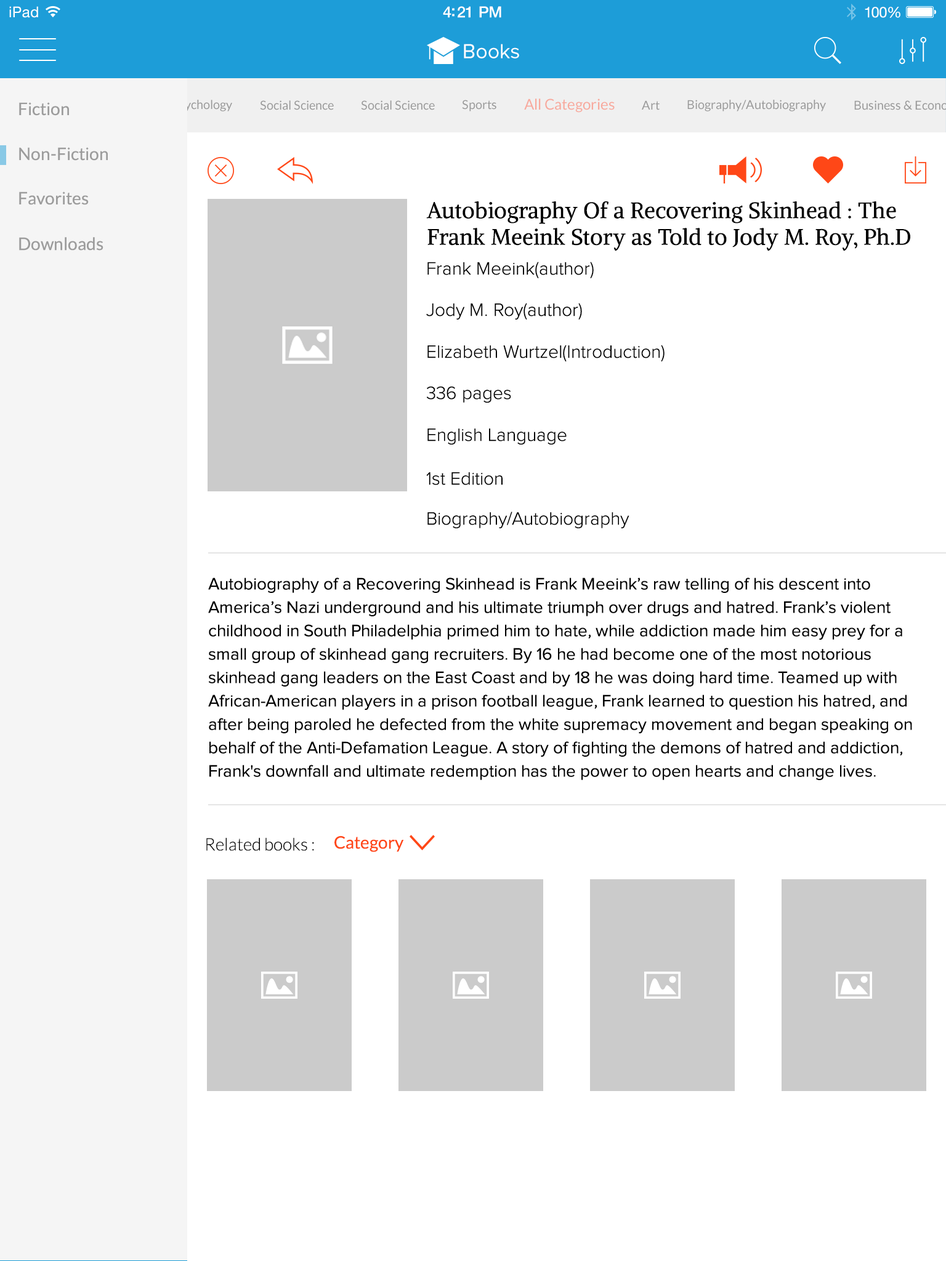
<style>
.page{position:relative;width:946px;height:1261px;background:#ffffff}
.page>*{position:absolute;margin:0}
.t1{font:14.8px "HelveticaNeue";letter-spacing:0.02em;color:#ffffff}
.t2{font:15.4px "HelveticaNeue-Medium";letter-spacing:-0.02em;color:#ffffff}
.t3{font:14.8px "HelveticaNeue";letter-spacing:-0.02em;color:#ffffff}
.t4{font:20.9px "ProximaNova-Regular";color:#ffffff}
.t5{font:12.3px "Lato-Regular";color:#999999}
.t6{font:14.8px "Lato-Regular";color:#f8a99d}
.t7{font:17.3px "Lato-Regular";color:#9c9c9c}
.t8{font:22.2px "Alike-Regular";color:#000000}
.t9{font:18.5px "ProximaNova-Light";color:#000000}
.t10{font:17.2px/23.4px "ProximaNova-Regular";color:#000000}
.t11{font:17.2px "Lato-Light";color:#000000}
.t12{font:17.2px "Lato-Regular";color:#ff4717}
</style>
<div class="page">
<p class="t1" style="left:9px;top:6px;width:29px;height:12px">iPad</p>
<p class="t2" style="left:443px;top:6px;width:58px;height:12px">4:21 PM</p>
<p class="t3" style="left:864px;top:7px;width:36px;height:11px">100%</p>
<p class="t4" style="left:464px;top:44px;width:55px;height:14px">Books</p>
<p class="t5" style="left:173px;top:100px;width:59px;height:11px">Psychology</p>
<p class="t5" style="left:260px;top:100px;width:74px;height:10px">Social Science</p>
<p class="t5" style="left:361px;top:100px;width:74px;height:10px">Social Science</p>
<p class="t5" style="left:462px;top:100px;width:34px;height:11px">Sports</p>
<p class="t6" style="left:524px;top:99px;width:90px;height:14px">All Categories</p>
<p class="t5" style="left:642px;top:100px;width:17px;height:10px">Art</p>
<p class="t5" style="left:687px;top:100px;width:139px;height:11px">Biography/Autobiography</p>
<p class="t7" style="left:19px;top:102px;width:50px;height:14px">Fiction</p>
<p class="t7" style="left:19px;top:147px;width:89px;height:14px">Non-Fiction</p>
<p class="t7" style="left:19px;top:191px;width:70px;height:14px">Favorites</p>
<p class="t8" style="left:426px;top:201px;width:484px;height:50px">Autobiography Of a Recovering Skinhead : The Frank Meeink Story as Told to Jody M. Roy, Ph.D</p>
<p class="t7" style="left:19px;top:237px;width:84px;height:14px">Downloads</p>
<p class="t9" style="left:427px;top:262px;width:167px;height:16px">Frank Meeink(author)</p>
<p class="t9" style="left:426px;top:303px;width:156px;height:17px">Jody M. Roy(author)</p>
<p class="t9" style="left:427px;top:345px;width:237px;height:17px">Elizabeth Wurtzel(Introduction)</p>
<p class="t9" style="left:426px;top:386px;width:85px;height:17px">336 pages</p>
<p class="t9" style="left:427px;top:429px;width:139px;height:16px">English Language</p>
<p class="t9" style="left:426px;top:472px;width:76px;height:13px">1st Edition</p>
<p class="t9" style="left:427px;top:512px;width:202px;height:16px">Biography/Autobiography</p>
<p class="t10" style="left:208px;top:578px;width:704px;height:202px">Autobiography of a Recovering Skinhead is Frank Meeink’s raw telling of his descent into America’s Nazi underground and his ultimate triumph over drugs and hatred. Frank’s violent childhood in South Philadelphia primed him to hate, while addiction made him easy prey for a small group of skinhead gang recruiters. By 16 he had become one of the most notorious skinhead gang leaders on the East Coast and by 18 he was doing hard time. Teamed up with African-American players in a prison football league, Frank learned to question his hatred, and after being paroled he defected from the white supremacy movement and began speaking on behalf of the Anti-Defamation League. A story of fighting the demons of hatred and addiction, Frank's downfall and ultimate redemption has the power to open hearts and change lives.</p>
<p class="t11" style="left:206px;top:837px;width:108px;height:14px">Related books :</p>
<p class="t12" style="left:334px;top:835px;width:70px;height:17px">Category</p>
</div>
